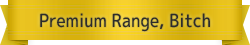
<style>
.page{position:relative;width:250px;height:45px}
.page>*{position:absolute;margin:0}
.t1{font:18px "mplus-1p-medium";color:#2c2c2c;scale:0.9 1}
</style>
<div class="page">
<p class="t1" style="left:40px;top:13px;width:170px;height:19px">Premium Range, Bitch</p>
</div>
